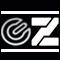
<style>
.page{position:relative;width:60px;height:60px;background:#000206}
.page>*{position:absolute;margin:0}
.t1{font:47.7px "Digital-Desolation-Plus";color:#fdfdfd;font-variant:small-caps;font-weight:bold;scale:0.77 1}
</style>
<div class="page">
<p class="t1" style="left:31px;top:17px;width:28px;height:29px">z</p>
</div>
